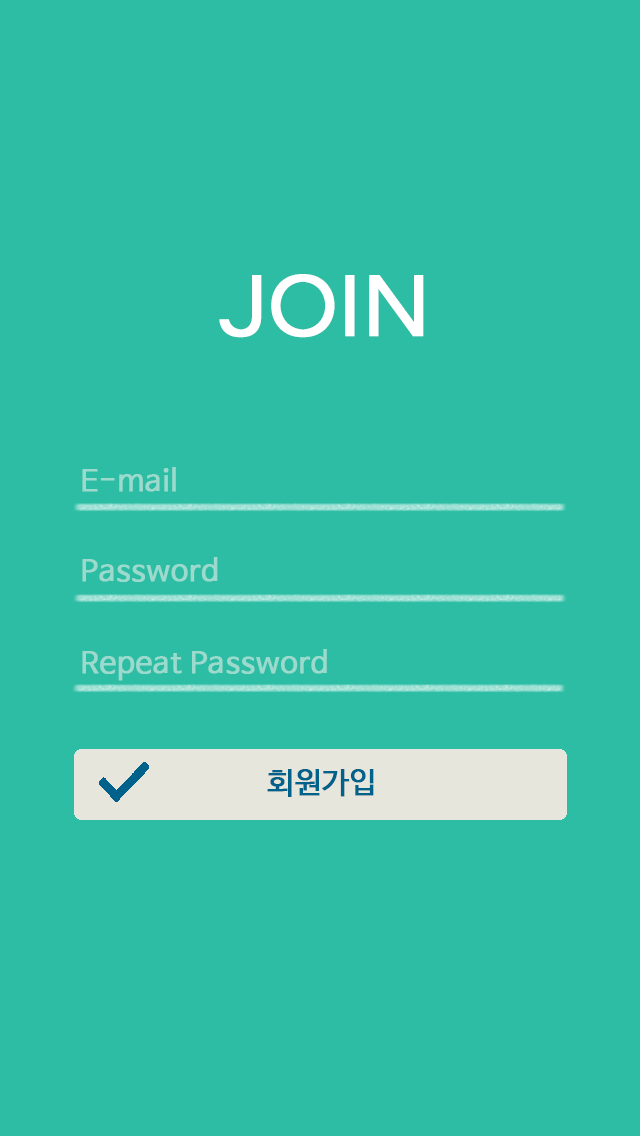
<style>
.page{position:relative;width:640px;height:1136px;background:#2dbda4}
.page>*{position:absolute;margin:0}
.t1{font:90px "Questrial-Regular";color:#ffffff;font-weight:bold}
.t2{font:30px "NanumBarunGothic";color:#9cdacd;font-weight:bold}
.t3{font:30px "NanumBarunGothic";color:#00628b;font-weight:bold}
</style>
<div class="page">
<p class="t1" style="left:219px;top:274px;width:205px;height:64px">JOIN</p>
<p class="t2" style="left:82px;top:467px;width:94px;height:25px">E-mail</p>
<p class="t2" style="left:82px;top:557px;width:136px;height:25px">Password</p>
<p class="t2" style="left:82px;top:649px;width:245px;height:32px">Repeat Password</p>
<p class="t3" style="left:267px;top:769px;width:107px;height:28px">회원가입</p>
</div>
